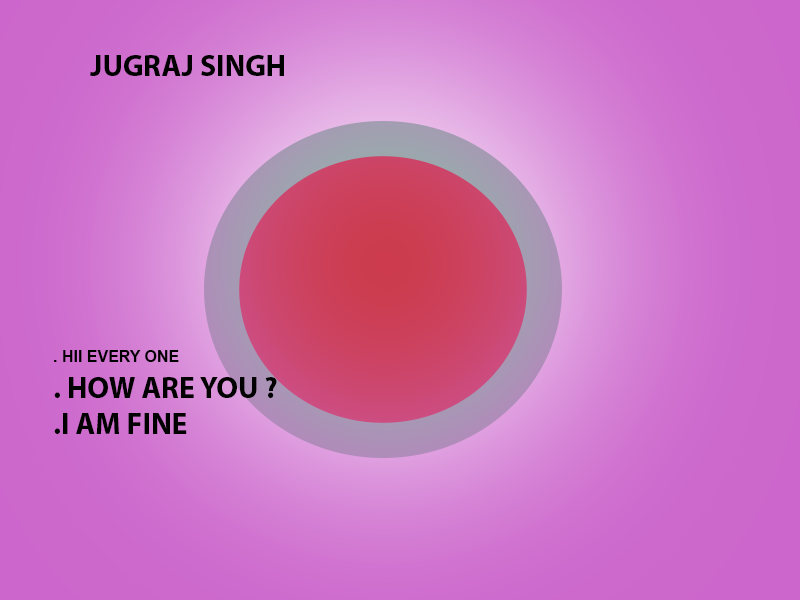
<style>
.page{position:relative;width:800px;height:600px}
.page>*{position:absolute;margin:0}
.t1{font:30px "MyriadPro-Bold";color:#000000}
.t2{font:16px "Arial-BoldMT";color:#000000}
</style>
<div class="page">
<p class="t1" style="left:90px;top:55px;width:194px;height:21px">JUGRAJ SINGH</p>
<p class="t1" style="left:54px;top:350px;width:223px;height:84px"><span class="t2">. HII EVERY ONE<br></span>. HOW ARE YOU ?<br>.I AM FINE</p>
</div>
